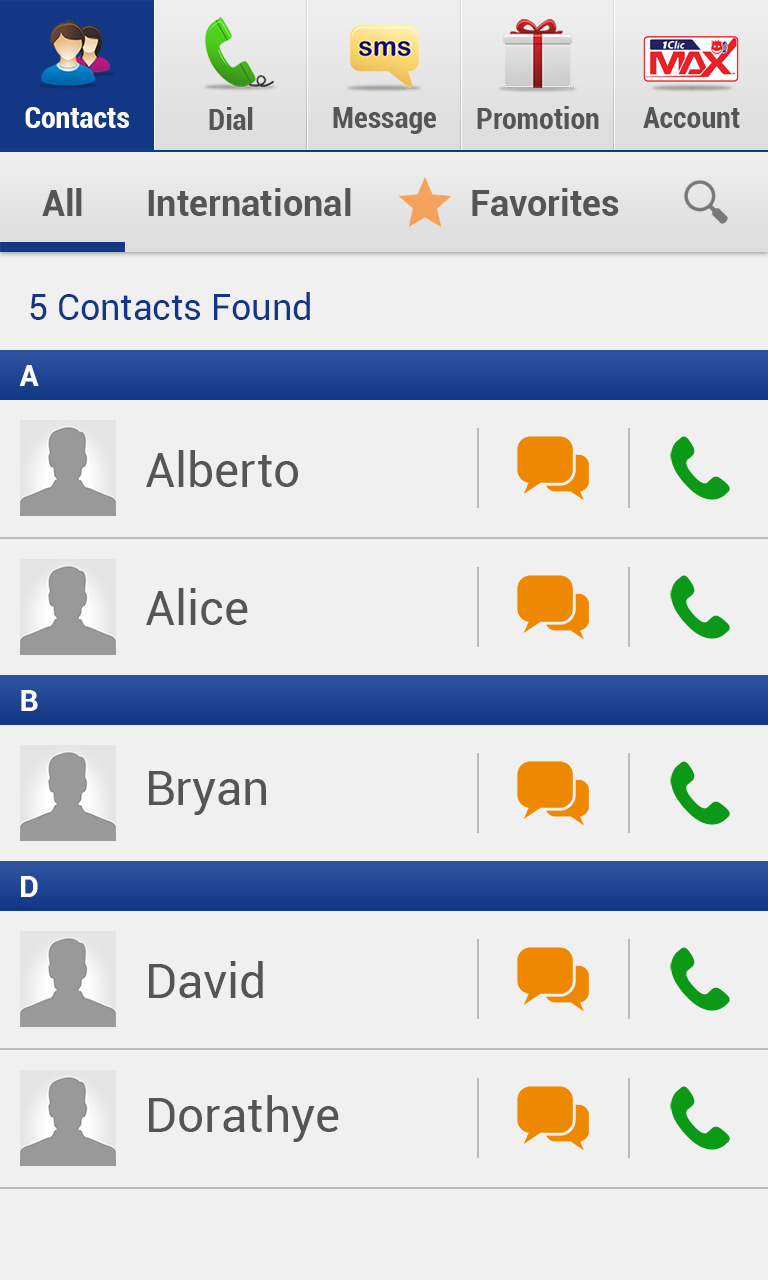
<style>
.page{position:relative;width:768px;height:1280px;background:#f0f0f0}
.page>*{position:absolute;margin:0}
.t1{font:30px "Roboto-BoldCondensed";color:#ffffff}
.t2{font:30px "Roboto-BoldCondensed";color:#555555}
.t3{font:36px "Roboto-Bold";color:#555555}
.t4{font:36px "Roboto-Regular";color:#123785}
.t5{font:30px "Roboto-Bold";color:#ffffff}
.t6{font:48px "Roboto-Regular";color:#555555}
</style>
<div class="page">
<p class="t1" style="left:25px;top:107px;width:104px;height:21px">Contacts</p>
<p class="t2" style="left:209px;top:107px;width:44px;height:23px">Dial</p>
<p class="t2" style="left:333px;top:107px;width:103px;height:27px">Message</p>
<p class="t2" style="left:477px;top:106px;width:122px;height:23px">Promotion</p>
<p class="t2" style="left:643px;top:107px;width:97px;height:21px">Account</p>
<p class="t3" style="left:42px;top:188px;width:40px;height:28px">All</p>
<p class="t3" style="left:148px;top:188px;width:203px;height:28px">International</p>
<p class="t3" style="left:472px;top:188px;width:147px;height:28px">Favorites</p>
<p class="t4" style="left:30px;top:292px;width:280px;height:28px">5 Contacts Found</p>
<p class="t5" style="left:19px;top:365px;width:20px;height:21px">A</p>
<p class="t6" style="left:146px;top:450px;width:152px;height:37px">Alberto</p>
<p class="t6" style="left:146px;top:588px;width:102px;height:37px">Alice</p>
<p class="t5" style="left:21px;top:690px;width:17px;height:21px">B</p>
<p class="t6" style="left:149px;top:771px;width:117px;height:44px">Bryan</p>
<p class="t5" style="left:21px;top:876px;width:17px;height:21px">D</p>
<p class="t6" style="left:149px;top:961px;width:114px;height:37px">David</p>
<p class="t6" style="left:149px;top:1095px;width:190px;height:47px">Dorathye</p>
</div>
